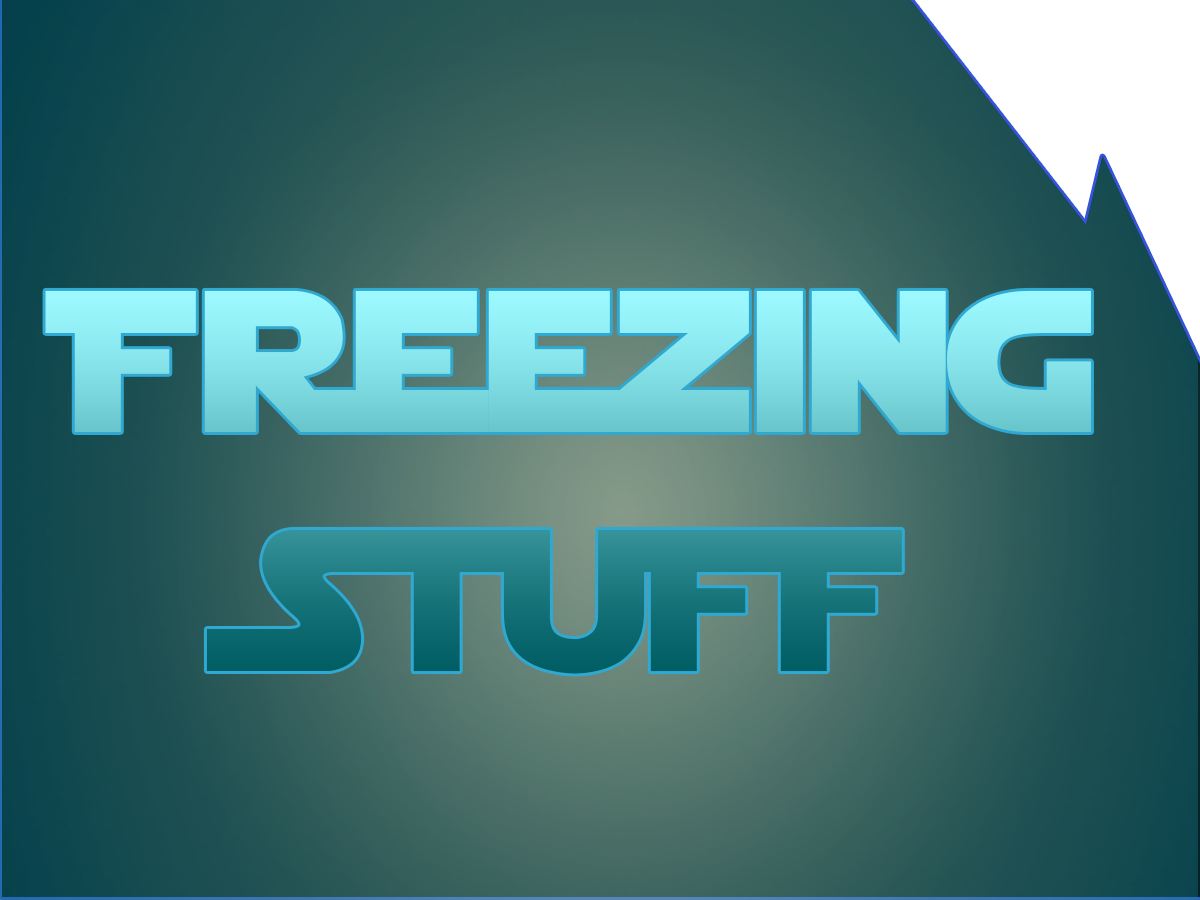
<style>
.page{position:relative;width:1200px;height:900px}
.page>*{position:absolute;margin:0}
.t1{font:200px "StarJedi"}
</style>
<div class="page">
<p class="t1" style="left:45px;top:290px;width:1046px;height:384px;text-align:center">Freezing<br>StuFF</p>
</div>
